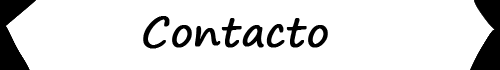
<style>
.page{position:relative;width:500px;height:70px;background:#ffffff}
.page>*{position:absolute;margin:0}
.t1{font:40px "SegoePrint";color:#000000;font-weight:bold}
</style>
<div class="page">
<p class="t1" style="left:143px;top:16px;width:185px;height:33px">Contacto</p>
</div>
